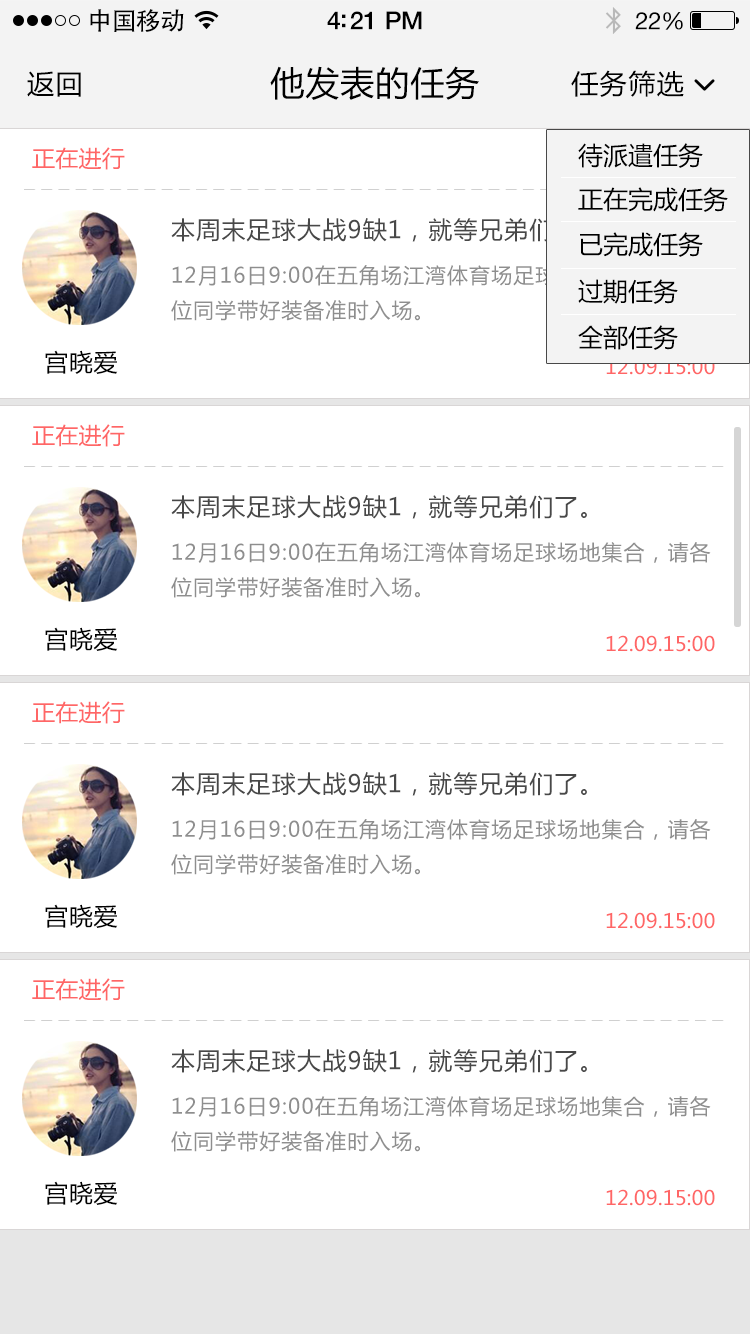
<style>
.page{position:relative;width:750px;height:1334px;background:#ffffff}
.page>*{position:absolute;margin:0}
.t1{font:25px "AdobeHeitiStd-Regular";letter-spacing:-0.025em;color:#000000}
.t2{font:25px "HelveticaNeue-Medium";letter-spacing:-0.02em;color:#000000}
.t3{font:24px "HelveticaNeue";letter-spacing:-0.02em;color:#000000}
.t4{font:27px "MicrosoftYaHei";letter-spacing:0.05em;color:#000000}
.t5{font:34px "MicrosoftYaHei";letter-spacing:0.03em;color:#000000}
.t6{font:23px "MicrosoftYaHei";letter-spacing:0.01em;color:#ff6666}
.t7{font:24px "MicrosoftYaHei";letter-spacing:0.05em;color:#555555}
.t8{font:21px/35px "MicrosoftYaHei";letter-spacing:0.05em;color:#8e8e8e}
.t9{font:24px "MicrosoftYaHei";letter-spacing:0.03em;color:#000000}
.t10{font:20px "MicrosoftYaHei";letter-spacing:0.01em}
.t11{font:20px "MicrosoftYaHei";letter-spacing:0.01em;color:#ff6666}
</style>
<div class="page">
<p class="t1" style="left:90px;top:9px;width:94px;height:23px">中国移动</p>
<p class="t2" style="left:327px;top:11px;width:95px;height:19px">4:21 PM</p>
<p class="t3" style="left:635px;top:12px;width:48px;height:18px">22%</p>
<p class="t4" style="left:27px;top:71px;width:54px;height:26px">返回</p>
<p class="t5" style="left:270px;top:66px;width:209px;height:34px">他发表的任务</p>
<p class="t4" style="left:571px;top:70px;width:113px;height:27px">任务筛选</p>
<p class="t6" style="left:32px;top:147px;width:93px;height:23px">正在进行</p>
<p class="t7" style="left:171px;top:218px;width:416px;height:24px">本周末足球大战9缺1，就等兄弟们了。</p>
<p class="t8" style="left:171px;top:265px;width:540px;height:56px">12月16日9:00在五角场江湾体育场足球场地集合，请各<br>位同学带好装备准时入场。</p>
<p class="t9" style="left:45px;top:350px;width:73px;height:24px">宫晓爱</p>
<p class="t10" style="left:606px;top:358px;width:109px;height:17px">12.09.15:00</p>
<p class="t6" style="left:32px;top:424px;width:93px;height:23px">正在进行</p>
<p class="t7" style="left:171px;top:495px;width:416px;height:24px">本周末足球大战9缺1，就等兄弟们了。</p>
<p class="t8" style="left:171px;top:542px;width:540px;height:56px">12月16日9:00在五角场江湾体育场足球场地集合，请各<br>位同学带好装备准时入场。</p>
<p class="t9" style="left:45px;top:627px;width:73px;height:24px">宫晓爱</p>
<p class="t11" style="left:606px;top:635px;width:109px;height:17px">12.09.15:00</p>
<p class="t6" style="left:32px;top:701px;width:93px;height:23px">正在进行</p>
<p class="t7" style="left:171px;top:772px;width:416px;height:24px">本周末足球大战9缺1，就等兄弟们了。</p>
<p class="t8" style="left:171px;top:819px;width:540px;height:56px">12月16日9:00在五角场江湾体育场足球场地集合，请各<br>位同学带好装备准时入场。</p>
<p class="t9" style="left:45px;top:904px;width:73px;height:24px">宫晓爱</p>
<p class="t11" style="left:606px;top:912px;width:109px;height:17px">12.09.15:00</p>
<p class="t6" style="left:32px;top:978px;width:93px;height:23px">正在进行</p>
<p class="t7" style="left:171px;top:1049px;width:416px;height:24px">本周末足球大战9缺1，就等兄弟们了。</p>
<p class="t8" style="left:171px;top:1096px;width:540px;height:56px">12月16日9:00在五角场江湾体育场足球场地集合，请各<br>位同学带好装备准时入场。</p>
<p class="t9" style="left:45px;top:1181px;width:73px;height:24px">宫晓爱</p>
<p class="t11" style="left:606px;top:1189px;width:109px;height:17px">12.09.15:00</p>
</div>
